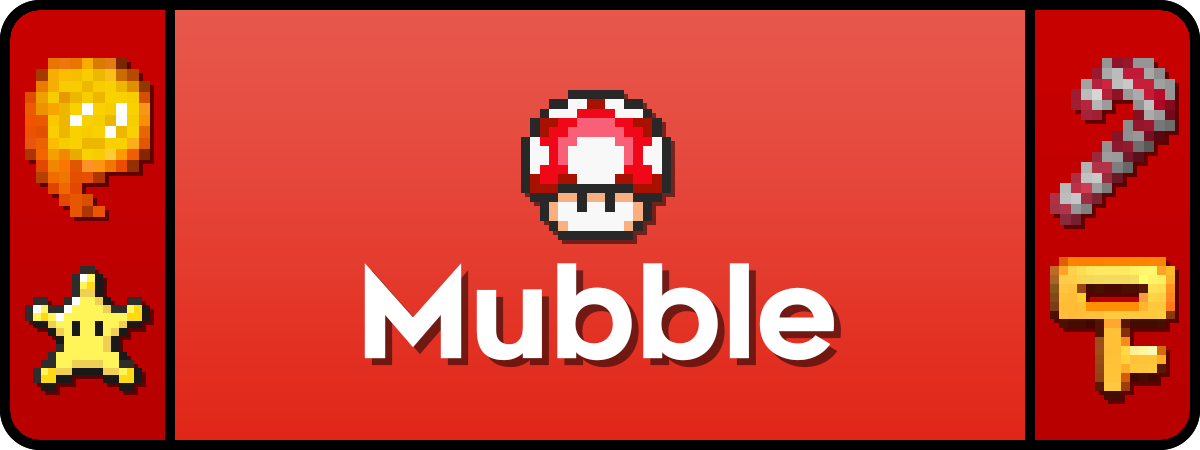
<style>
.page{position:relative;width:1200px;height:450px}
.page>*{position:absolute;margin:0}
.t1{font:124.9px "Renogare-Regular";letter-spacing:-0.05em;color:#ffffff;font-weight:bold}
</style>
<div class="page">
<p class="t1" style="left:364px;top:263px;width:470px;height:98px">Mubble</p>
</div>
